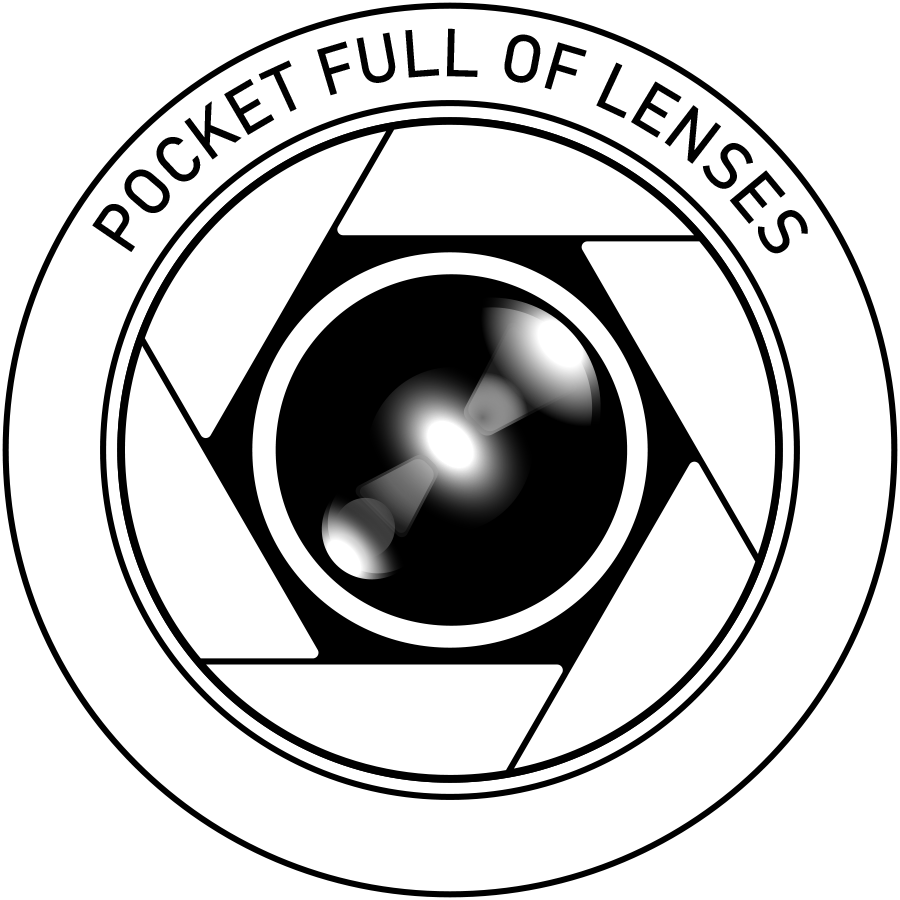
<style>
.page{position:relative;width:900px;height:900px;background:#ffffff}
.page>*{position:absolute;margin:0}
.t1{font:66.7px "Bahnschrift";color:#000000}
</style>
<div class="page">
<p class="t1" style="left:92px;top:28px;width:716px;height:226px">POCKET FULL OF LENSES</p>
</div>
